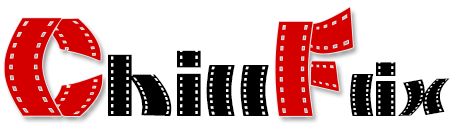
<style>
.page{position:relative;width:450px;height:125px;background:#ffffff}
.page>*{position:absolute;margin:0}
.t1{font:123.6px "MovieFilmstrip";color:#d40000}
.t2{font:135.9px "MovieFilmstrip";color:#d40000}
.t3{font:87.3px "MovieFilmstrip";color:#000000}
.t4{font:72px "MovieFilmstrip";color:#000000}
</style>
<div class="page">
<p class="t1" style="left:275px;top:7px;width:78px;height:109px">F</p>
<p class="t2" style="left:4px;top:18px;width:99px;height:98px">C</p>
<p class="t3" style="left:108px;top:50px;width:161px;height:66px">hill</p>
<p class="t4" style="left:350px;top:62px;width:100px;height:54px">lix</p>
</div>
